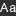
<style>
.page{position:relative;width:16px;height:16px;background:#313131}
.page>*{position:absolute;margin:0}
.t1{font:12.2px "HelveticaLTStd-Light";color:#ffffff}
</style>
<div class="page">
<p class="t1" style="left:0px;top:3px;width:9px;height:9px">A</p>
<p class="t1" style="left:9px;top:5px;width:7px;height:7px">a</p>
</div>
